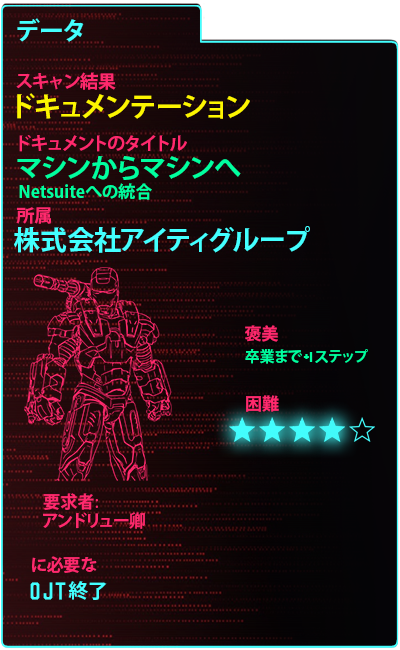
<style>
.page{position:relative;width:400px;height:650px}
.page>*{position:absolute;margin:0}
.t1{font:25px "KozGoPr6N-Bold";color:#43ffff}
.t2{font:18px "KozGoPr6N-Bold";color:#ff296d}
.t3{font:27.5px "KozGoPr6N-Bold";color:#fdf500}
.t4{font:27px "KozGoPr6N-Bold";color:#00ff9f}
.t5{font:17px "KozGoPr6N-Bold";color:#00ff9f}
.t6{font:27px "KozGoPr6N-Bold";color:#43ffff}
.t7{font:17px "KozGoPr6N-Bold";color:#ff296d}
.t8{font:15px "KozGoPr6N-Bold";color:#00ff9f}
.t9{font:15px "Blockletter";color:#00ff9f}
.t10{font:17px "KozGoPr6N-Regular";color:#ff296d}
.t11{font:42px "Party-Lights-[WLM]-Flat";color:#43ffff}
.t12{font:20px "KozGoPr6N-Bold";color:#43ffff}
</style>
<div class="page">
<p class="t1" style="left:17px;top:18px;width:67px;height:24px">データ</p>
<p class="t2" style="left:16px;top:72px;width:100px;height:18px">スキャン結果</p>
<p class="t3" style="left:17px;top:93px;width:233px;height:26px">ドキュメンテーション</p>
<p class="t2" style="left:19px;top:135px;width:168px;height:17px">ドキュメントのタイトル</p>
<p class="t4" style="left:17px;top:156px;width:224px;height:24px">マシンからマシンへ</p>
<p class="t5" style="left:19px;top:183px;width:133px;height:17px">Netsuiteへの統合</p>
<p class="t2" style="left:16px;top:207px;width:35px;height:17px">所属</p>
<p class="t6" style="left:14px;top:226px;width:296px;height:27px">株式会社アイティグループ</p>
<p class="t7" style="left:245px;top:325px;width:33px;height:17px">褒美</p>
<p class="t8" style="left:245px;top:349px;width:123px;height:15px">卒業まで<span class="t9"> +1 </span>ステップ</p>
<p class="t7" style="left:246px;top:395px;width:33px;height:17px">困難</p>
<p class="t7" style="left:43px;top:493px;width:55px;height:17px">要求者<span class="t10">:</span></p>
<p class="t7" style="left:43px;top:512px;width:102px;height:17px">アンドリュー卿</p>
<p class="t7" style="left:32px;top:556px;width:65px;height:17px">に必要な</p>
<p class="t11" style="left:30px;top:582px;width:36px;height:18px">OJT</p>
<p class="t12" style="left:68px;top:581px;width:39px;height:19px">終了</p>
</div>
